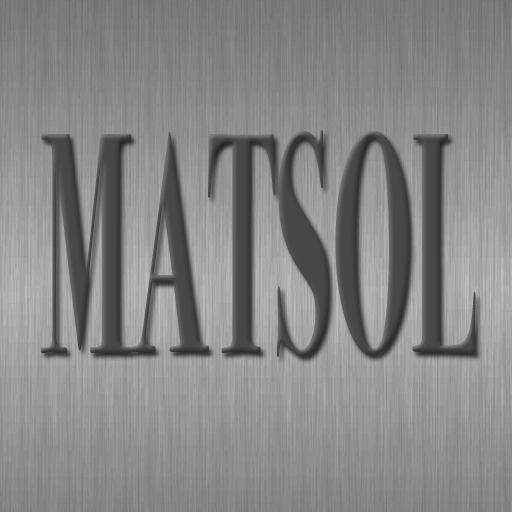
<style>
.page{position:relative;width:512px;height:512px}
.page>*{position:absolute;margin:0}
.t1{font:314.5px "BodoniSvtyTwoITCTTBold";color:#484848;scale:0.36 1}
</style>
<div class="page">
<p class="t1" style="left:40px;top:130px;width:436px;height:227px">MATSOL</p>
</div>
